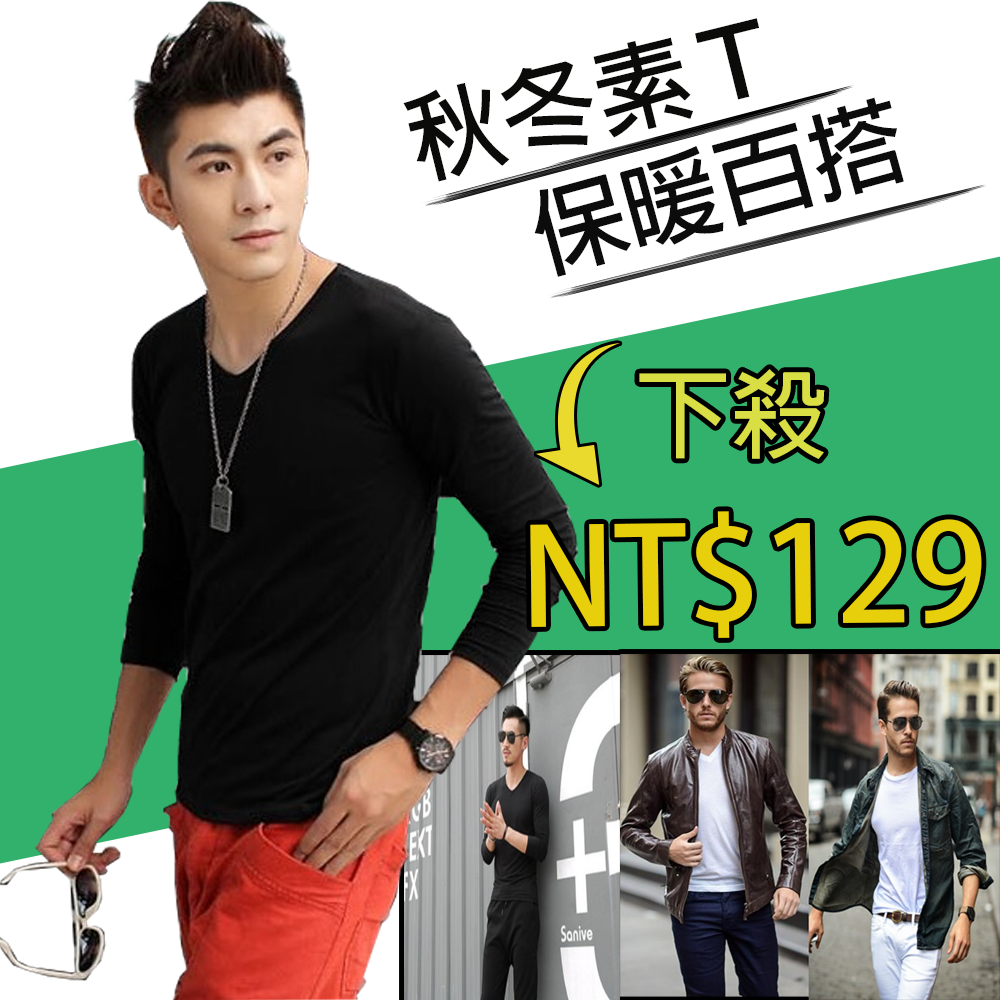
<style>
.page{position:relative;width:1000px;height:1000px;background:#ffffff}
.page>*{position:absolute;margin:0}
.t1{font:96px "AdobeFanHeitiStd-Bold";color:#0b0b0a}
.t2{font:96px "AdobeFanHeitiStd-Bold";color:#0c0c0c}
.t3{font:96px "AdobeFanHeitiStd-Bold";color:#d9de45}
.t4{font:133.3px "AdobeFanHeitiStd-Bold";color:#e7cf0c}
.t5{font:96px "AdobeFanHeitiStd-Bold";color:#f6ebec}
</style>
<div class="page">
<p class="t1" style="left:403px;top:18px;width:356px;height:164px;rotate:-14deg">秋冬素Ｔ</p>
<p class="t2" style="left:534px;top:97px;width:370px;height:180px;rotate:-15deg">保暖百搭</p>
<p class="t3" style="left:639px;top:369px;width:186px;height:90px">下殺</p>
<p class="t4" style="left:530px;top:511px;width:452px;height:127px;rotate:-1deg"><span class="t5"><br></span>NT$129</p>
</div>
